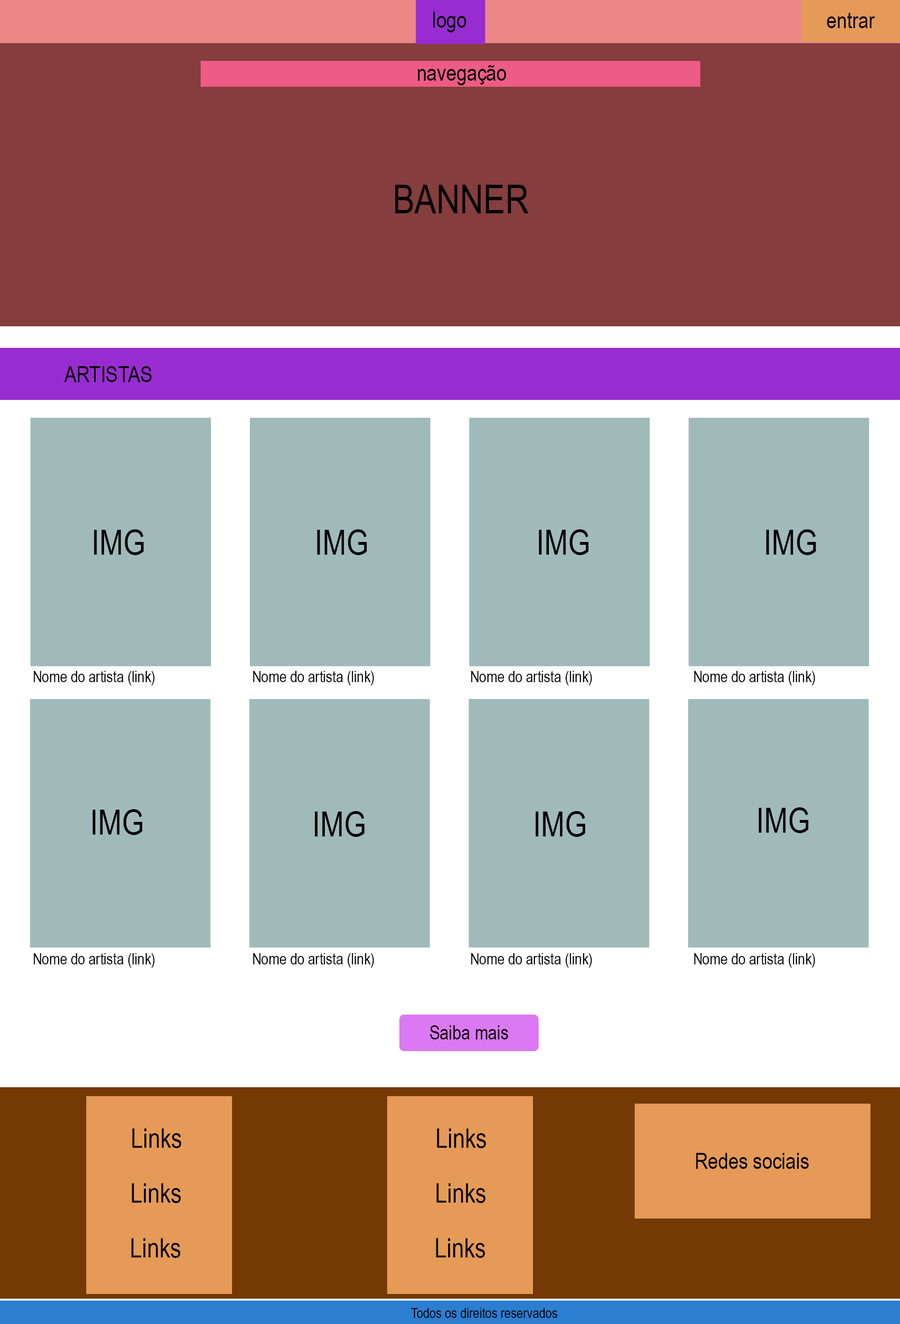
<style>
.page{position:relative;width:900px;height:1324px;background:#a0baba}
.page>*{position:absolute;margin:0}
.t1{font:22.5px "ArialNarrow";color:#000000}
.t2{font:39.8px "ArialNarrow";color:#000000}
.t3{font:34.8px "ArialNarrow";color:#000000}
.t4{font:15.8px "ArialNarrow";color:#000000}
.t5{font:19.6px "ArialNarrow";color:#000000}
.t6{font:26.8px "ArialNarrow";color:#000000}
.t7{font:14.1px "ArialNarrow";color:#000000}
</style>
<div class="page">
<p class="t1" style="left:433px;top:12px;width:34px;height:20px">logo</p>
<p class="t1" style="left:827px;top:12px;width:49px;height:16px">entrar</p>
<p class="t1" style="left:418px;top:65px;width:88px;height:20px">navegação</p>
<p class="t2" style="left:395px;top:185px;width:134px;height:28px">BANNER</p>
<p class="t1" style="left:64px;top:366px;width:88px;height:16px">ARTISTAS</p>
<p class="t3" style="left:94px;top:529px;width:50px;height:26px">IMG</p>
<p class="t3" style="left:317px;top:529px;width:50px;height:26px">IMG</p>
<p class="t3" style="left:539px;top:529px;width:50px;height:26px">IMG</p>
<p class="t3" style="left:766px;top:529px;width:50px;height:26px">IMG</p>
<p class="t4" style="left:34px;top:671px;width:121px;height:15px">Nome do artista (link)</p>
<p class="t4" style="left:253px;top:671px;width:121px;height:15px">Nome do artista (link)</p>
<p class="t4" style="left:471px;top:671px;width:121px;height:15px">Nome do artista (link)</p>
<p class="t4" style="left:695px;top:671px;width:121px;height:15px">Nome do artista (link)</p>
<p class="t3" style="left:92px;top:809px;width:51px;height:26px">IMG</p>
<p class="t3" style="left:759px;top:808px;width:50px;height:25px">IMG</p>
<p class="t3" style="left:315px;top:811px;width:50px;height:26px">IMG</p>
<p class="t3" style="left:536px;top:811px;width:50px;height:26px">IMG</p>
<p class="t4" style="left:34px;top:953px;width:121px;height:15px">Nome do artista (link)</p>
<p class="t4" style="left:253px;top:953px;width:121px;height:15px">Nome do artista (link)</p>
<p class="t4" style="left:471px;top:953px;width:121px;height:15px">Nome do artista (link)</p>
<p class="t4" style="left:695px;top:953px;width:121px;height:15px">Nome do artista (link)</p>
<p class="t5" style="left:430px;top:1026px;width:78px;height:14px">Saiba mais</p>
<p class="t6" style="left:132px;top:1129px;width:49px;height:19px">Links</p>
<p class="t6" style="left:437px;top:1129px;width:49px;height:19px">Links</p>
<p class="t1" style="left:696px;top:1153px;width:113px;height:16px">Redes sociais</p>
<p class="t6" style="left:132px;top:1184px;width:49px;height:19px">Links</p>
<p class="t6" style="left:437px;top:1184px;width:49px;height:19px">Links</p>
<p class="t6" style="left:131px;top:1239px;width:50px;height:19px">Links</p>
<p class="t6" style="left:436px;top:1239px;width:49px;height:19px">Links</p>
<p class="t7" style="left:411px;top:1308px;width:147px;height:10px">Todos os direitos reservados</p>
</div>
